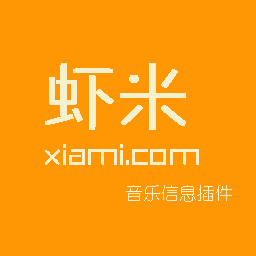
<style>
.page{position:relative;width:256px;height:256px;background:#ff9604}
.page>*{position:absolute;margin:0}
.t1{font:72px "FZZHYJW--GB1-0";color:#f5f1ce;font-weight:bold}
.t2{font:48px "FZZHYJW--GB1-0";color:#f5f1ce}
.t3{font:18px "YouYuan";color:#f5f1ce}
</style>
<div class="page">
<p class="t1" style="left:45px;top:63px;width:141px;height:67px">虾米</p>
<p class="t2" style="left:45px;top:144px;width:154px;height:21px">xiami.com</p>
<p class="t3" style="left:126px;top:185px;width:106px;height:17px">音乐信息插件</p>
</div>
